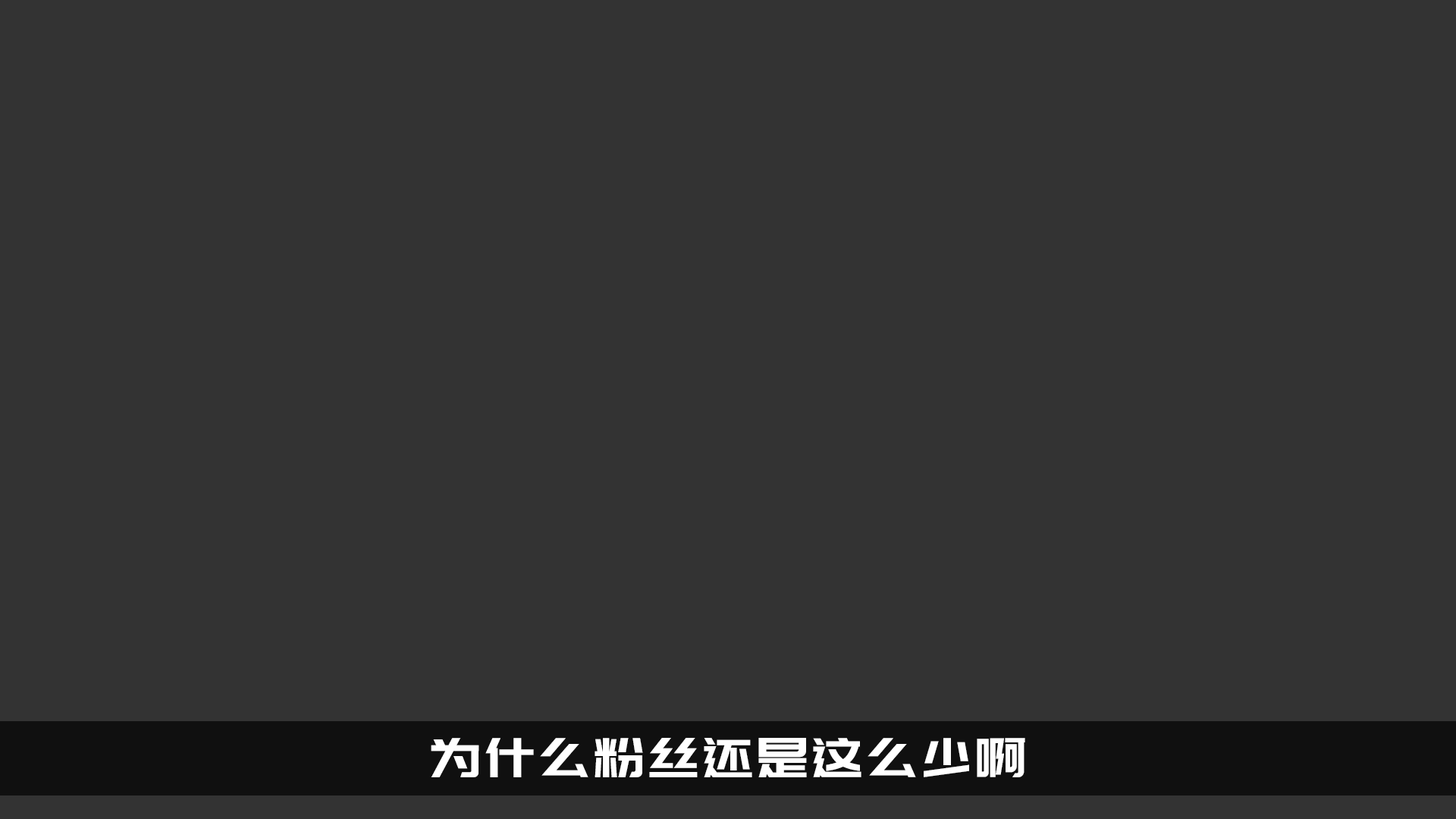
<style>
.page{position:relative;width:1456px;height:819px;background:#333333}
.page>*{position:absolute;margin:0}
.t1{font:54.6px "PangMenZhengDao-3";color:#ffffff}
</style>
<div class="page">
<p class="t1" style="left:431px;top:738px;width:594px;height:39px">为什么粉丝还是这么少啊</p>
</div>
